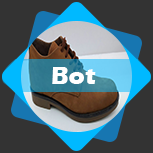
<style>
.page{position:relative;width:153px;height:153px;background:#333333}
.page>*{position:absolute;margin:0}
.t1{font:25px "ErasITC-Bold";color:#ffffff}
</style>
<div class="page">
<p class="t1" style="left:52px;top:67px;width:44px;height:17px">Bot</p>
</div>
